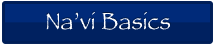
<style>
.page{position:relative;width:215px;height:45px;background:#002160}
.page>*{position:absolute;margin:0}
.t1{font:24px "Papyrus";color:#ffffff}
</style>
<div class="page">
<p class="t1" style="left:46px;top:12px;width:124px;height:18px">Na’vi Basics</p>
</div>
